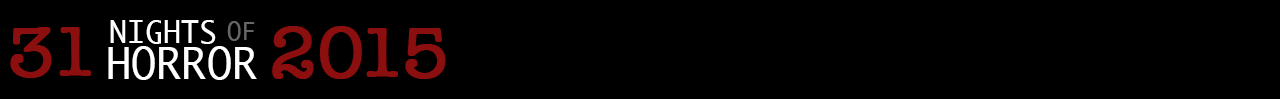
<style>
.page{position:relative;width:1280px;height:99px;background:#000000}
.page>*{position:absolute;margin:0}
.t1{font:72px "AmericanTypewriter";color:#8c0f0f;text-transform:uppercase;font-weight:bold}
.t2{font:30px "Ayuthaya";color:#ffffff;text-transform:uppercase}
.t3{font:42px/36px "Ayuthaya";color:#ffffff;text-transform:uppercase}
.t4{font:24px "Ayuthaya";color:#676565;text-transform:uppercase}
</style>
<div class="page">
<p class="t1" style="left:10px;top:27px;width:81px;height:51px">31</p>
<p class="t2" style="left:108px;top:20px;width:149px;height:60px;text-align:center">Nights   <br><span class="t3">Horror</span></p>
<p class="t4" style="left:227px;top:21px;width:28px;height:20px">of</p>
<p class="t1" style="left:272px;top:26px;width:174px;height:53px">2015</p>
</div>
